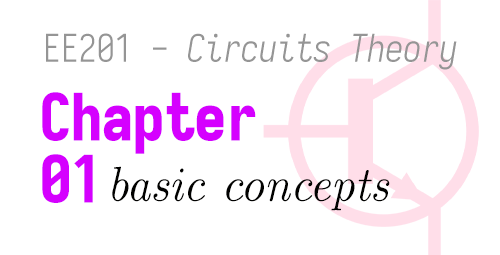
<style>
.page{position:relative;width:500px;height:255px;background:#ffffff}
.page>*{position:absolute;margin:0}
.t1{font:38px "Iosevka-Light-Italic";color:#959595;scale:0.95 1}
.t2{font:38px "Iosevka-Light";color:#959595;scale:0.95 1}
.t3{font:65px/62px "Iosevka-Heavy";color:#d500ff;scale:0.95 1}
.t4{font:49px "CMUSerif-Italic";color:#010100;scale:0.95 1}
</style>
<div class="page">
<p class="t1" style="left:46px;top:33px;width:411px;height:37px"><span class="t2">EE201 - </span>Circuits Theory</p>
<p class="t3" style="left:42px;top:92px;width:214px;height:111px">Chapter <br>01</p>
<p class="t4" style="left:112px;top:166px;width:278px;height:45px">basic concepts</p>
</div>
